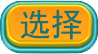
<style>
.page{position:relative;width:98px;height:54px}
.page>*{position:absolute;margin:0}
.t1{font:32px "SimHei";color:#1e756d}
</style>
<div class="page">
<p class="t1" style="left:20px;top:9px;width:62px;height:31px">选择</p>
</div>
